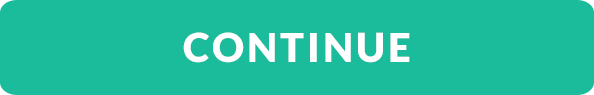
<style>
.page{position:relative;width:594px;height:95px;background:#1abc9c}
.page>*{position:absolute;margin:0}
.t1{font:40px "Lato-Black";letter-spacing:0.075em;color:#ffffff}
</style>
<div class="page">
<p class="t1" style="left:183px;top:32px;width:227px;height:31px">CONTINUE</p>
</div>
